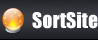
<style>
.page{position:relative;width:98px;height:40px}
.page>*{position:absolute;margin:0}
.t1{font:19.9px "Impact";color:#ffffff}
</style>
<div class="page">
<p class="t1" style="left:32px;top:12px;width:66px;height:17px">SortSite</p>
</div>
